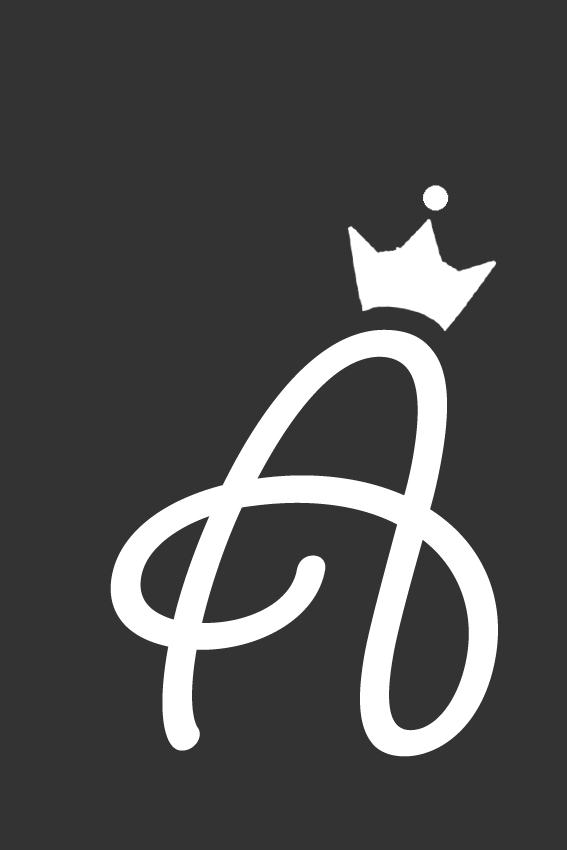
<style>
.page{position:relative;width:567px;height:850px;background:#333333}
.page>*{position:absolute;margin:0}
.t1{font:650px "GiddyupStd";color:#ffffff;font-style:italic}
</style>
<div class="page">
<p class="t1" style="left:110px;top:329px;width:388px;height:428px">A</p>
</div>
